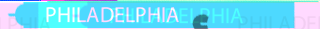
<style>
.page{position:relative;width:320px;height:29px;background:#4dd9ff}
.page>*{position:absolute;margin:0}
.t1{font:21.8px "MyriadPro-Regular"}
</style>
<div class="page">
<p class="t1" style="left:46px;top:7px;width:133px;height:16px;rotate:23deg">PHILADELPHIA</p>
</div>
